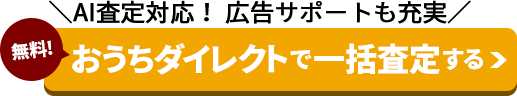
<style>
.page{position:relative;width:517px;height:96px;background:#f2a700}
.page>*{position:absolute;margin:0}
.t1{font:24px "NotoSansCJKjp-Regular";color:#000000;font-weight:bold}
.t2{font:18px "NotoSansCJKjp-Black";color:#ffffff}
.t3{font:32px "NotoSansCJKjp-Black";color:#ffffff}
.t4{font:24px "NotoSansCJKjp-Black";color:#ffffff}
</style>
<div class="page">
<p class="t1" style="left:49px;top:0px;width:422px;height:24px">＼AI査定対応！ 広告サポートも充実／</p>
<p class="t2" style="left:11px;top:40px;width:42px;height:21px;rotate:-6deg">無料!</p>
<p class="t3" style="left:72px;top:43px;width:216px;height:32px">おうちダイレクト</p>
<p class="t4" style="left:290px;top:50px;width:22px;height:20px">で</p>
<p class="t3" style="left:314px;top:43px;width:126px;height:32px">一括査定</p>
<p class="t4" style="left:443px;top:48px;width:40px;height:23px">する</p>
</div>
